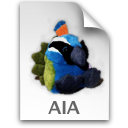
<style>
.page{position:relative;width:128px;height:128px;background:#ffffff}
.page>*{position:absolute;margin:0}
.t1{font:18px "LucidaGrande-Bold";letter-spacing:-0.02em;color:#656565}
</style>
<div class="page">
<p class="t1" style="left:48px;top:101px;width:32px;height:13px">AIA</p>
</div>
